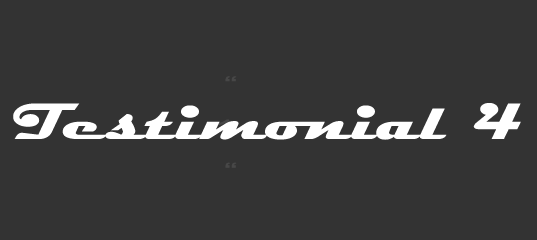
<style>
.page{position:relative;width:537px;height:240px;background:#333333}
.page>*{position:absolute;margin:0}
.t1{font:51.6px "Magneto-Bold";color:#ffffff;scale:1.33 1}
</style>
<div class="page">
<p class="t1" style="left:13px;top:103px;width:508px;height:37px">Testimonial 4</p>
</div>
